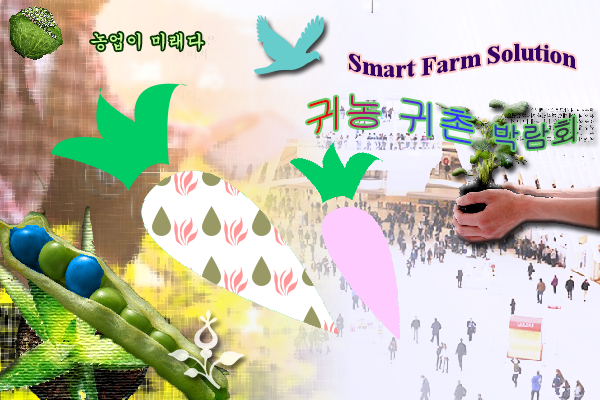
<style>
.page{position:relative;width:600px;height:400px}
.page>*{position:absolute;margin:0}
.t1{font:18px "Gungsuh";color:#ccff99}
.t2{font:25px "TimesNewRomanPS-BoldMT";color:#330066}
.t3{font:40px "Gulim"}
.t4{font:30px "Gulim"}
</style>
<div class="page">
<p class="t1" style="left:91px;top:32px;width:113px;height:19px">농업이 미래다</p>
<p class="t2" style="left:348px;top:43px;width:228px;height:35px">Smart Farm Solution</p>
<p class="t3" style="left:307px;top:95px;width:268px;height:55px">귀농 귀촌 <span class="t4">박람회</span></p>
</div>
